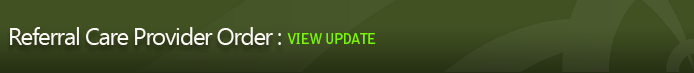
<style>
.page{position:relative;width:694px;height:73px;background:#415122}
.page>*{position:absolute;margin:0}
.t1{font:24px "SegoeUI";letter-spacing:-0.05em;color:#faf7f5}
.t2{font:14px "BellGothicStd-Bold";letter-spacing:-0.05em;color:#7af40e}
</style>
<div class="page">
<p class="t1" style="left:10px;top:27px;width:271px;height:18px">Referral Care Provider Order :</p>
<p class="t2" style="left:287px;top:33px;width:89px;height:11px">VIEW UPDATE</p>
</div>
